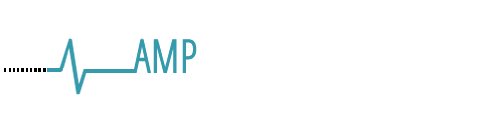
<style>
.page{position:relative;width:500px;height:128px;background:#ffffff}
.page>*{position:absolute;margin:0}
.t1{font:45.6px "OpenSans-CondensedLight";color:#359aab;font-weight:bold;scale:0.89 1}
</style>
<div class="page">
<p class="t1" style="left:133px;top:37px;width:64px;height:36px">AMP</p>
</div>
